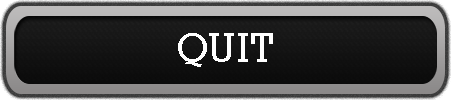
<style>
.page{position:relative;width:451px;height:100px}
.page>*{position:absolute;margin:0}
.t1{font:41.7px "Rockwell";color:#ffffff}
</style>
<div class="page">
<p class="t1" style="left:178px;top:33px;width:95px;height:34px">QUIT</p>
</div>
